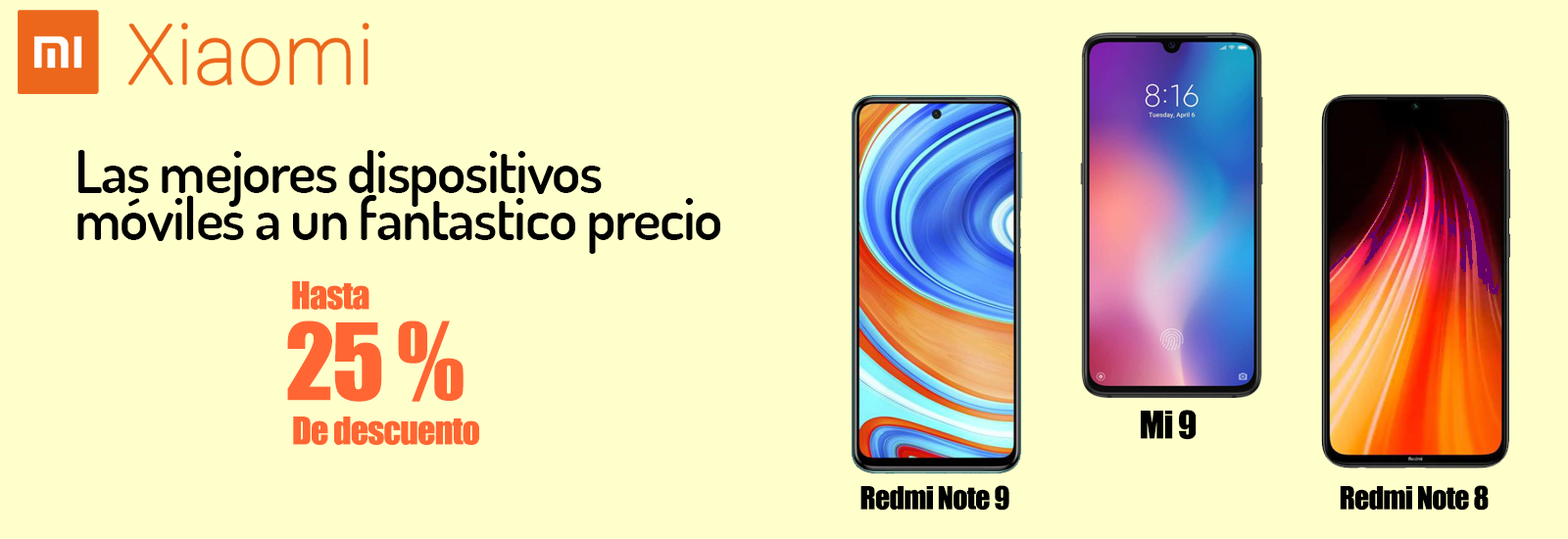
<style>
.page{position:relative;width:1568px;height:539px;background:#ffffcc}
.page>*{position:absolute;margin:0}
.t1{font:58.8px/23.5px "Dosis-SemiBold";letter-spacing:-0.025em;color:#000000}
.t2{font:35.3px "Impact";letter-spacing:-0.025em;color:#ff6633}
.t3{font:98px "Impact";letter-spacing:-0.025em;color:#ff6633}
.t4{font:35.3px "Impact";letter-spacing:-0.025em;color:#000000}
.t5{font:29.4px "Impact";letter-spacing:-0.025em;color:#000000}
</style>
<div class="page">
<p class="t1" style="left:77px;top:150px;width:643px;height:104px">Las mejores dispositivos <br><br>móviles a un fantastico precio</p>
<p class="t2" style="left:292px;top:281px;width:77px;height:29px">Hasta</p>
<p class="t3" style="left:287px;top:320px;width:177px;height:82px">25 %</p>
<p class="t4" style="left:1141px;top:410px;width:56px;height:30px">Mi 9</p>
<p class="t2" style="left:293px;top:416px;width:186px;height:29px">De descuento</p>
<p class="t5" style="left:860px;top:485px;width:149px;height:26px">Redmi Note 9</p>
<p class="t5" style="left:1340px;top:485px;width:149px;height:26px">Redmi Note 8</p>
</div>
